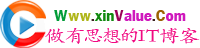
<style>
.page{position:relative;width:200px;height:48px;background:#ffffff}
.page>*{position:absolute;margin:0}
.t1{font:15.5px "FranklinGothic-DemiCond";letter-spacing:0.06em;color:#cf18bc;scale:1.17 1}
.t2{font:15.5px "FranklinGothic-DemiCond";letter-spacing:0.06em;color:#019c38;scale:1.17 1}
.t3{font:15.5px "FranklinGothic-DemiCond";letter-spacing:0.06em;color:#afb519;scale:1.17 1}
.t4{font:15.5px "FranklinGothic-DemiCond";letter-spacing:0.06em;color:#3a2020;scale:1.17 1}
.t5{font:15.5px "FranklinGothic-DemiCond";letter-spacing:0.06em;color:#11890f;scale:1.17 1}
.t6{font:15.5px "FranklinGothic-DemiCond";letter-spacing:0.06em;color:#9c0159;scale:1.17 1}
.t7{font:15.5px "FranklinGothic-DemiCond";letter-spacing:0.06em;color:#9c6301;scale:1.17 1}
.t8{font:17.8px "STKaiti";letter-spacing:0.06em;color:#f10981;scale:1.17 1}
</style>
<div class="page">
<p class="t1" style="left:54px;top:10px;width:132px;height:11px"><span class="t2">W</span><span class="t3">ww</span><span class="t4">.</span><span class="t5">xin</span><span class="t6">V</span>alue<span class="t4">.</span><span class="t7">C</span>om</p>
<p class="t8" style="left:45px;top:28px;width:155px;height:16px">做有思想的IT博客</p>
</div>
